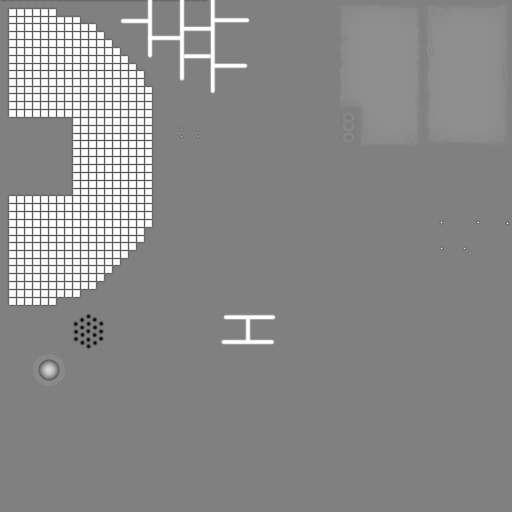
<style>
.page{position:relative;width:512px;height:512px;background:#808080}
.page>*{position:absolute;margin:0}
.t1{font:15.6px "MyriadPro-Bold";color:#888888}
</style>
<div class="page">
<p class="t1" style="left:343px;top:112px;width:12px;height:31px;rotate:-90deg">ОСО</p>
</div>
